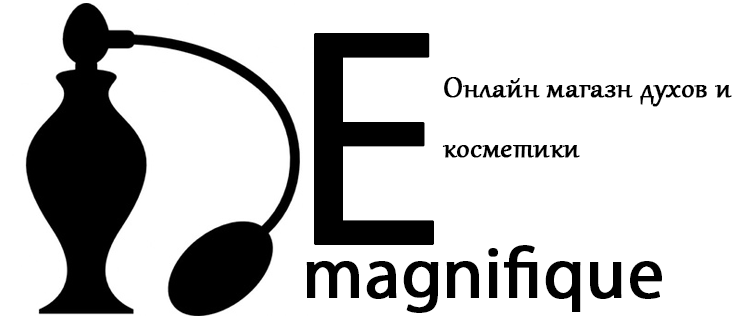
<style>
.page{position:relative;width:755px;height:316px;background:#ffffff}
.page>*{position:absolute;margin:0}
.t1{font:311.6px "MyriadPro-Regular";color:#000000;font-weight:bold}
.t2{font:36px/60px "Gabriola";color:#000000;font-weight:bold}
.t3{font:72px "MyriadPro-Regular";color:#000000;font-weight:bold}
</style>
<div class="page">
<p class="t1" style="left:314px;top:33px;width:120px;height:212px">E</p>
<p class="t2" style="left:442px;top:77px;width:290px;height:81px">Онлайн магазн духов и  косметики</p>
<p class="t3" style="left:306px;top:245px;width:356px;height:68px">magnifique</p>
</div>
